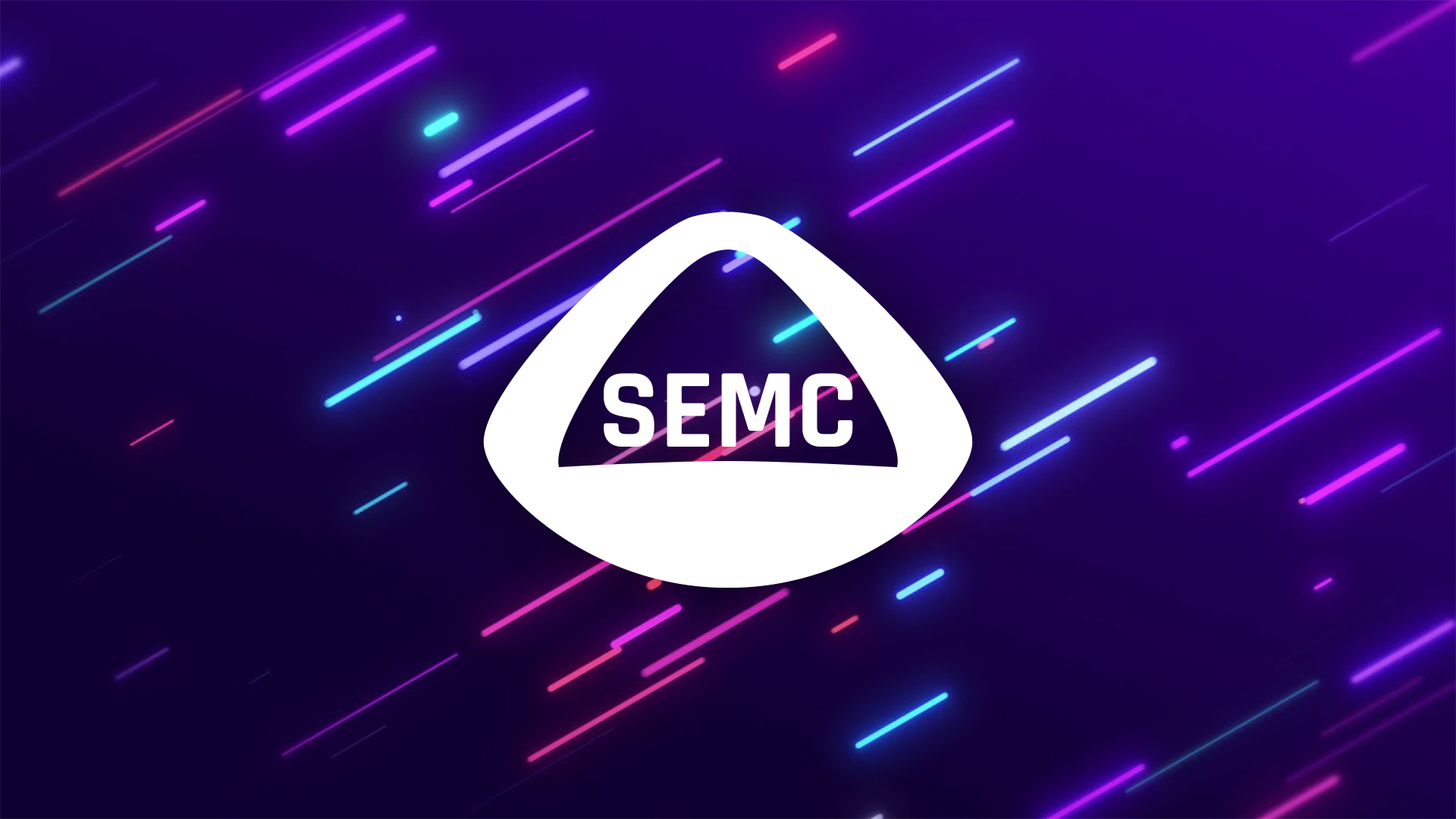
<style>
.page{position:relative;width:1456px;height:819px}
.page>*{position:absolute;margin:0}
.t1{font:113.6px "Rajdhani-Bold";color:#ffffff}
</style>
<div class="page">
<p class="t1" style="left:604px;top:373px;width:249px;height:74px">SEMC</p>
</div>
